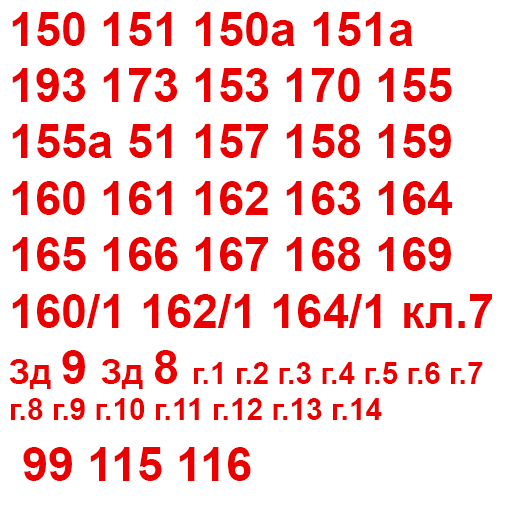
<style>
.page{position:relative;width:512px;height:512px;background:#ffffff}
.page>*{position:absolute;margin:0}
.t1{font:47px "Arial-BoldMT";color:#e90001}
.t2{font:34px "Arial-BoldMT";color:#e90001}
.t3{font:30px "Arial-BoldMT";color:#e90001}
</style>
<div class="page">
<p class="t1" style="left:9px;top:12px;width:483px;height:408px">150 151 150a 151a 193 173 153 170 155 155a 51 157 158 159 160 161 162 163 164 165 166 167 168 169 160/1 162/1 164/1 кл.7 <span class="t2">Зд </span>9 <span class="t2">Зд </span>8 <span class="t3">г.1 г.2 г.3 г.4 г.5 г.6 г.7 г.8 г.9 г.10 г.11 г.12 г.13 г.14</span></p>
<p class="t1" style="left:23px;top:447px;width:228px;height:34px">99 115 116</p>
</div>
